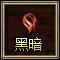
<style>
.page{position:relative;width:60px;height:60px}
.page>*{position:absolute;margin:0}
.t1{font:14px "SimSun"}
</style>
<div class="page">
<p class="t1" style="left:15px;top:37px;width:27px;height:14px">黑暗</p>
</div>
